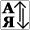
<style>
.page{position:relative;width:30px;height:30px;background:#ffffff}
.page>*{position:absolute;margin:0}
.t1{font:15px "Georgia-Bold";letter-spacing:0.05em;color:#000000;font-weight:bold}
</style>
<div class="page">
<p class="t1" style="left:1px;top:2px;width:14px;height:12px">А</p>
<p class="t1" style="left:2px;top:16px;width:13px;height:12px">Я</p>
</div>
